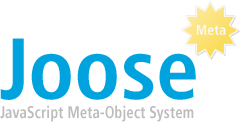
<style>
.page{position:relative;width:240px;height:130px;background:#ffffff}
.page>*{position:absolute;margin:0}
.t1{font:86.5px "FrutigerLT-BoldCn";color:#00a3dd}
.t2{font:16.7px "FrutigerLT-BoldCn";color:#bdbbbb;scale:0.9 1}
</style>
<div class="page">
<p class="t1" style="left:0px;top:38px;width:196px;height:62px">Joose</p>
<p class="t2" style="left:0px;top:105px;width:194px;height:17px">JavaScript Meta-Object System</p>
</div>
